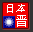
<style>
.page{position:relative;width:33px;height:32px;background:#f20000}
.page>*{position:absolute;margin:0}
.t1{font:10.4px "SimSun";color:#ffffff}
.t2{font:11.7px "SimSun";color:#ffffff}
</style>
<div class="page">
<p class="t1" style="left:7px;top:4px;width:18px;height:9px">日本</p>
<p class="t2" style="left:16px;top:15px;width:11px;height:12px">晋</p>
</div>
